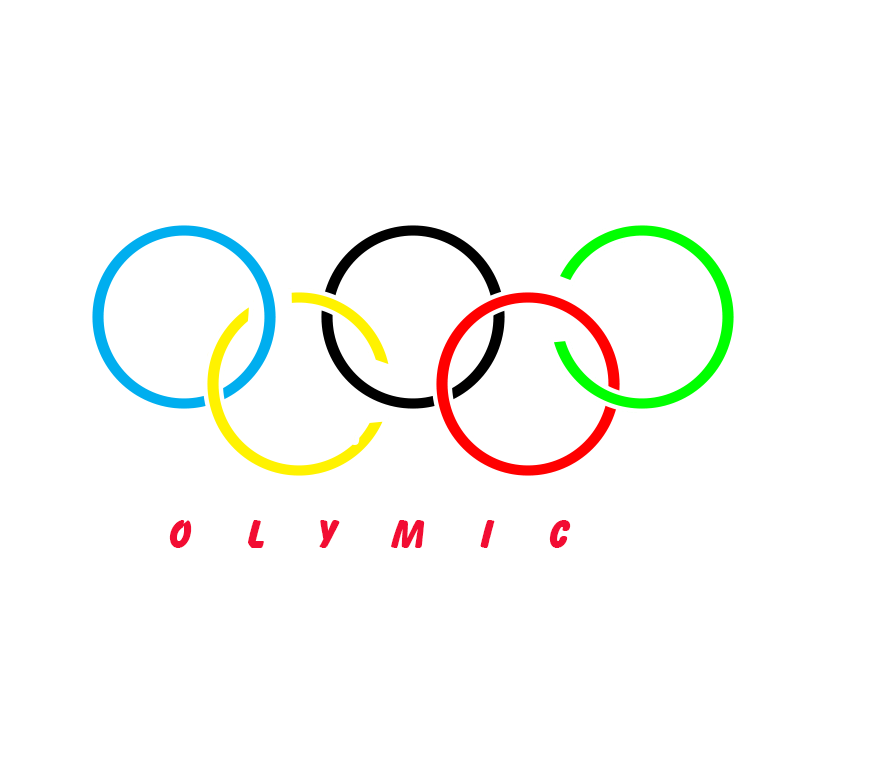
<style>
.page{position:relative;width:879px;height:768px;background:#ffffff}
.page>*{position:absolute;margin:0}
.t1{font:42px "BalloonBT-ExtraBold";letter-spacing:1.3em;color:#f20d33;text-transform:uppercase}
</style>
<div class="page">
<p class="t1" style="left:169px;top:520px;width:402px;height:28px">OLYMIC</p>
</div>
